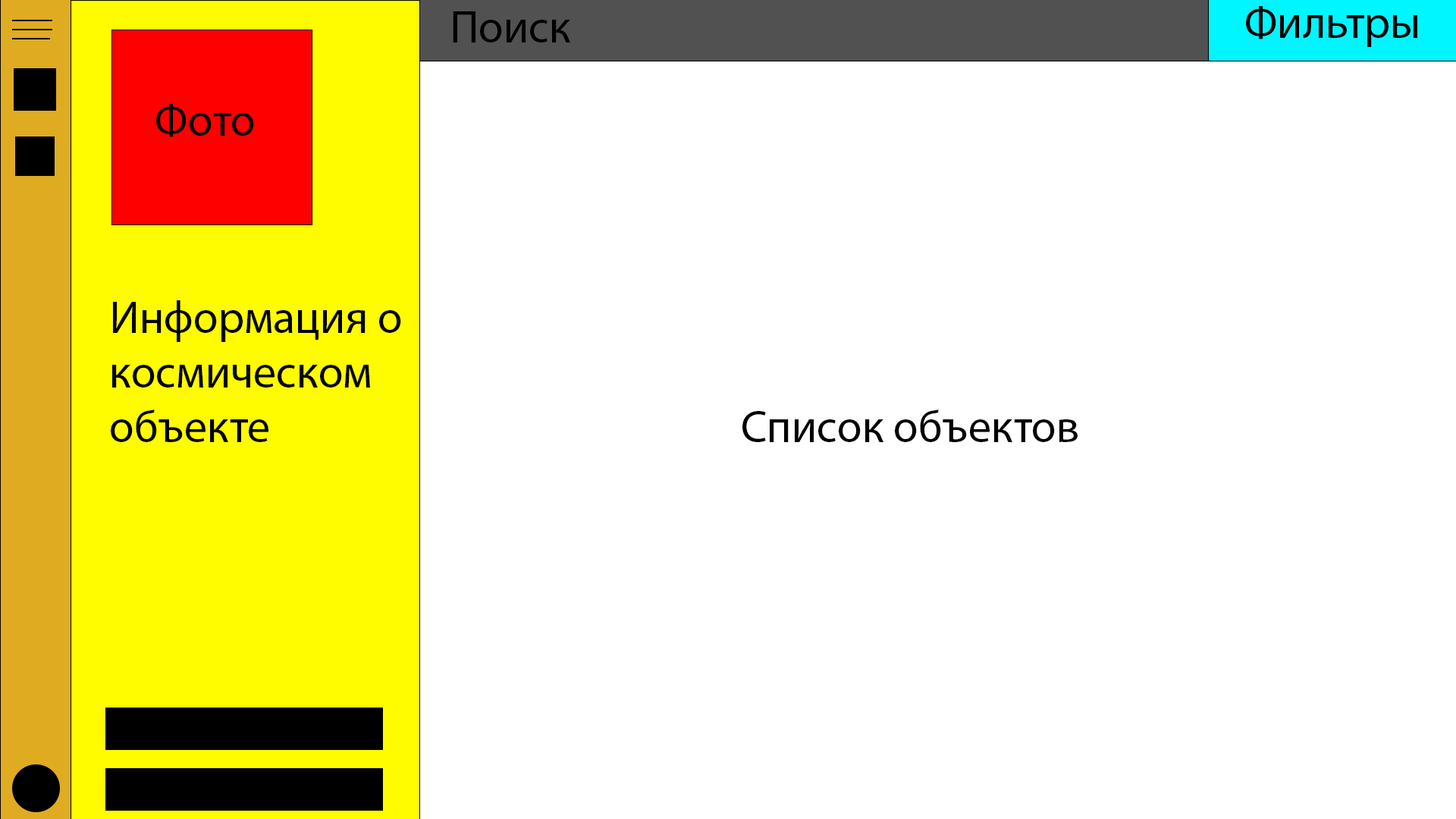
<style>
.page{position:relative;width:1456px;height:819px;background:#ffffff}
.page>*{position:absolute;margin:0}
.t1{font:45.5px "MyriadPro-Regular";color:#000000}
</style>
<div class="page">
<p class="t1" style="left:453px;top:11px;width:117px;height:31px">Поиск</p>
<p class="t1" style="left:1246px;top:6px;width:171px;height:41px">Фильтры</p>
<p class="t1" style="left:156px;top:104px;width:98px;height:33px">Фото</p>
<p class="t1" style="left:111px;top:300px;width:290px;height:142px">Информация о <br>космическом <br>объекте</p>
<p class="t1" style="left:742px;top:409px;width:336px;height:33px">Список объектов</p>
</div>
